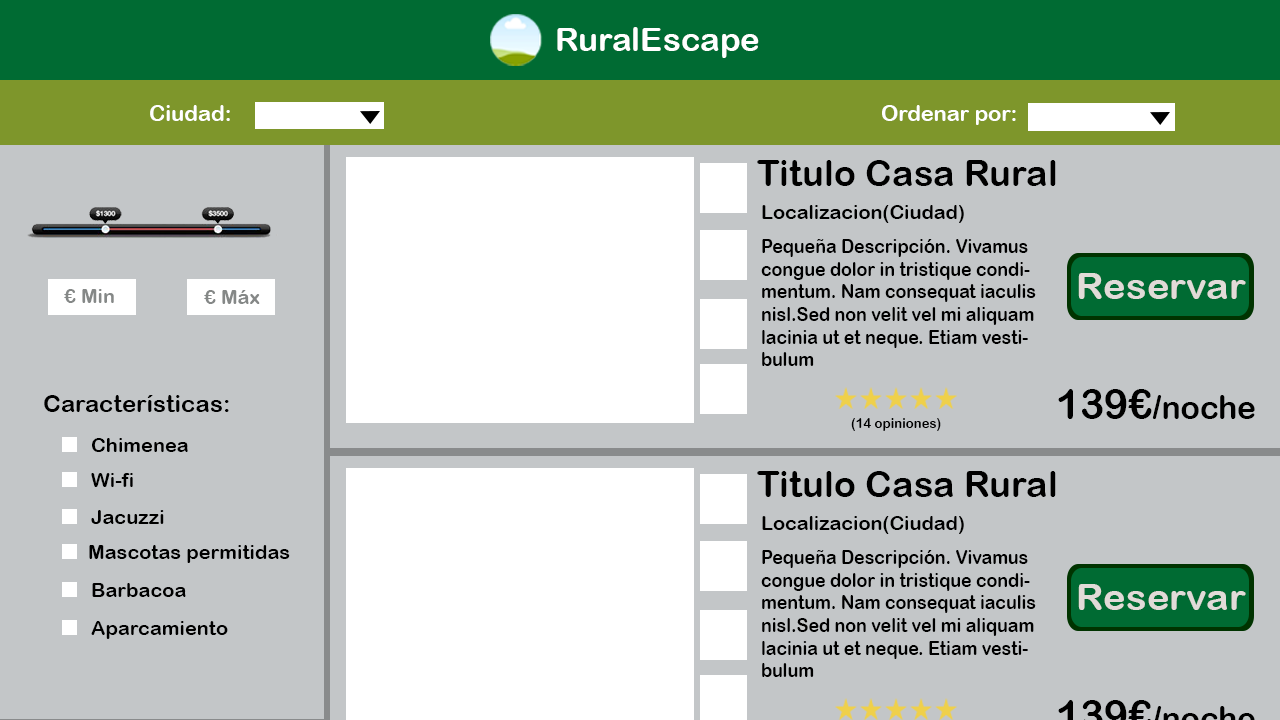
<style>
.page{position:relative;width:1280px;height:720px;background:#c3c6c8}
.page>*{position:absolute;margin:0}
.t1{font:33.4px "ArialRoundedMTBold";color:#ffffff}
.t2{font:21.8px "ArialRoundedMTBold";color:#ffffff}
.t3{font:22.2px "ArialRoundedMTBold";color:#ffffff}
.t4{font:36.3px "ArialRoundedMTBold";color:#000000}
.t5{font:19.8px "ArialRoundedMTBold";color:#000000}
.t6{font:18.8px "ArialRoundedMTBold";color:#000000;scale:0.94 1}
.t7{font:37.1px "ArialRoundedMTBold";color:#e1dbd8;scale:1.04 1}
.t8{font:20px "ArialRoundedMTBold";color:#858887}
.t9{font:32.9px "ArialRoundedMTBold";color:#000000;scale:0.97 1}
.t10{font:41.9px "ArialRoundedMTBold";color:#000000;scale:0.97 1}
.t11{font:24px "ArialRoundedMTBold";color:#000000}
.t12{font:14.1px "ArialRoundedMTBold";color:#000000;scale:0.93 1}
.t13{font:20px "ArialRoundedMTBold";color:#000000}
</style>
<div class="page">
<p class="t1" style="left:557px;top:27px;width:202px;height:31px">RuralEscape</p>
<p class="t2" style="left:150px;top:105px;width:80px;height:16px">Ciudad:</p>
<p class="t3" style="left:882px;top:105px;width:134px;height:20px">Ordenar por:</p>
<p class="t4" style="left:757px;top:160px;width:299px;height:26px">Titulo Casa Rural</p>
<p class="t5" style="left:762px;top:205px;width:202px;height:18px">Localizacion(Ciudad)</p>
<p class="t6" style="left:761px;top:239px;width:275px;height:127px">Pequeña Descripción. Vivamus congue dolor in tristique condimentum. Nam consequat iaculis nisl.Sed non velit vel mi aliquam lacinia ut et neque. Etiam vestibulum</p>
<p class="t7" style="left:1078px;top:273px;width:168px;height:26px">Reservar</p>
<p class="t8" style="left:64px;top:289px;width:50px;height:14px">€ Min</p>
<p class="t8" style="left:204px;top:290px;width:56px;height:14px">€ Máx</p>
<p class="t9" style="left:1058px;top:389px;width:197px;height:30px"><span class="t10">139€</span>/noche</p>
<p class="t11" style="left:44px;top:395px;width:185px;height:17px">Características:</p>
<p class="t12" style="left:851px;top:418px;width:90px;height:13px">(14 opiniones)</p>
<p class="t13" style="left:92px;top:438px;width:96px;height:14px">Chimenea</p>
<p class="t13" style="left:91px;top:473px;width:42px;height:14px">Wi-fi</p>
<p class="t4" style="left:757px;top:471px;width:299px;height:26px">Titulo Casa Rural</p>
<p class="t13" style="left:91px;top:510px;width:73px;height:14px">Jacuzzi</p>
<p class="t5" style="left:762px;top:516px;width:202px;height:18px">Localizacion(Ciudad)</p>
<p class="t13" style="left:89px;top:545px;width:201px;height:18px">Mascotas permitidas</p>
<p class="t6" style="left:761px;top:550px;width:275px;height:127px">Pequeña Descripción. Vivamus congue dolor in tristique condimentum. Nam consequat iaculis nisl.Sed non velit vel mi aliquam lacinia ut et neque. Etiam vestibulum</p>
<p class="t13" style="left:92px;top:583px;width:94px;height:14px">Barbacoa</p>
<p class="t7" style="left:1078px;top:584px;width:168px;height:26px">Reservar</p>
<p class="t13" style="left:91px;top:621px;width:137px;height:18px">Aparcamiento</p>
</div>
